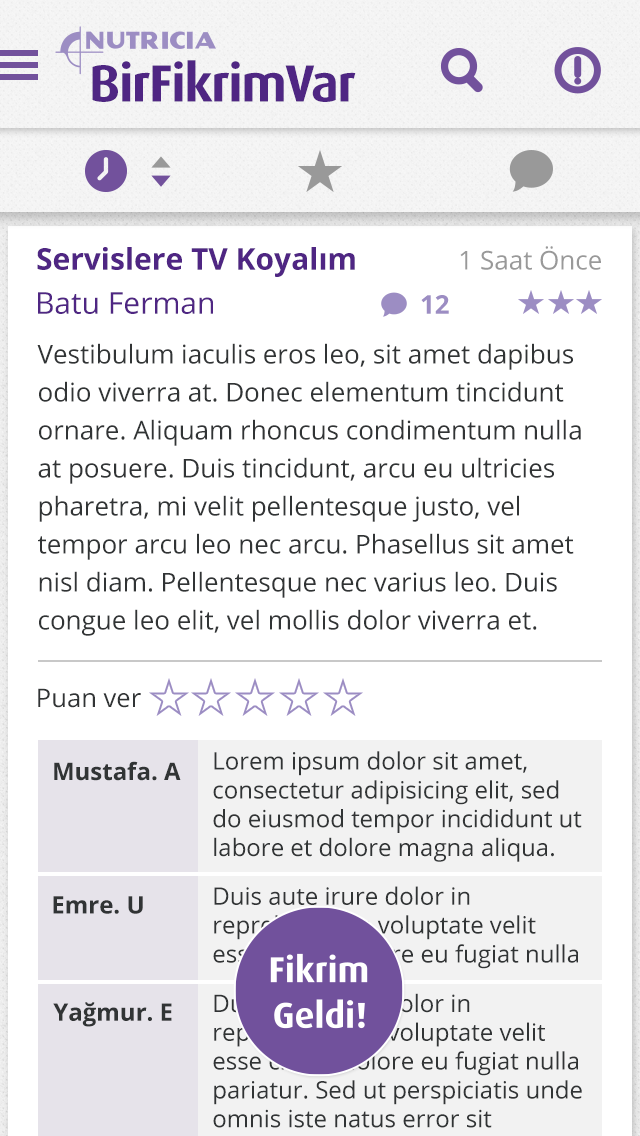
<style>
.page{position:relative;width:640px;height:1136px;background:#ffffff}
.page>*{position:absolute;margin:0}
.t1{font:52.5px "DaxPro-Bold";letter-spacing:-0.025em;color:#4f2683}
.t2{font:26px "OpenSans";color:#999999}
.t3{font:30px "OpenSans-Bold";color:#4f2683}
.t4{font:30px "OpenSans";color:#4f2683}
.t5{font:26px "OpenSans-Bold";color:#9c8dc3}
.t6{font:26px/38px "OpenSans";color:#313435}
.t7{font:25.6px "OpenSans";color:#313435}
.t8{font:24px "OpenSans-Bold";color:#313435}
.t9{font:24px "OpenSans";color:#313435}
</style>
<div class="page">
<p class="t1" style="left:92px;top:60px;width:264px;height:42px">BirFikrimVar</p>
<p class="t2" style="left:460px;top:246px;width:141px;height:24px">1 Saat Önce</p>
<p class="t3" style="left:37px;top:247px;width:318px;height:30px">Servislere TV Koyalım</p>
<p class="t4" style="left:38px;top:292px;width:175px;height:22px">Batu Ferman</p>
<p class="t5" style="left:421px;top:295px;width:28px;height:19px">12</p>
<p class="t6" style="left:37px;top:343px;width:544px;height:293px">Vestibulum iaculis eros leo, sit amet dapibus odio viverra at. Donec elementum tincidunt ornare. Aliquam rhoncus condimentum nulla at posuere. Duis tincidunt, arcu eu ultricies pharetra, mi velit pellentesque justo, vel tempor arcu leo nec arcu. Phasellus sit amet nisl diam. Pellentesque nec varius leo. Duis congue leo elit, vel mollis dolor viverra et.</p>
<p class="t7" style="left:38px;top:688px;width:103px;height:20px">Puan ver</p>
<p class="t8" style="left:54px;top:761px;width:127px;height:20px">Mustafa. A</p>
<p class="t9" style="left:213px;top:751px;width:369px;height:111px">Lorem ipsum dolor sit amet, consectetur adipisicing elit, sed do eiusmod tempor incididunt ut labore et dolore magna aliqua.</p>
<p class="t9" style="left:213px;top:886px;width:365px;height:83px">Duis aute irure dolor in reprehende in voluptate velit esse cillum dolore eu fugiat nulla pariatur.</p>
<p class="t8" style="left:53px;top:896px;width:90px;height:18px">Emre. U</p>
<p class="t8" style="left:53px;top:1002px;width:119px;height:25px">Yağmur. E</p>
</div>
